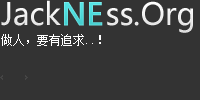
<style>
.page{position:relative;width:200px;height:100px;background:#333333}
.page>*{position:absolute;margin:0}
.t1{font:30.4px "MicrosoftYaHei";color:#ffffff}
.t2{font:30.4px "MicrosoftYaHei";color:#55e4e5;font-weight:bold}
.t3{font:12px "SimSun";color:#ffffff}
</style>
<div class="page">
<p class="t1" style="left:1px;top:0px;width:192px;height:33px">Jack     ss.Org</p>
<p class="t2" style="left:64px;top:2px;width:39px;height:24px">NE</p>
<p class="t3" style="left:1px;top:34px;width:100px;height:12px">做人，要有追求..！</p>
</div>
